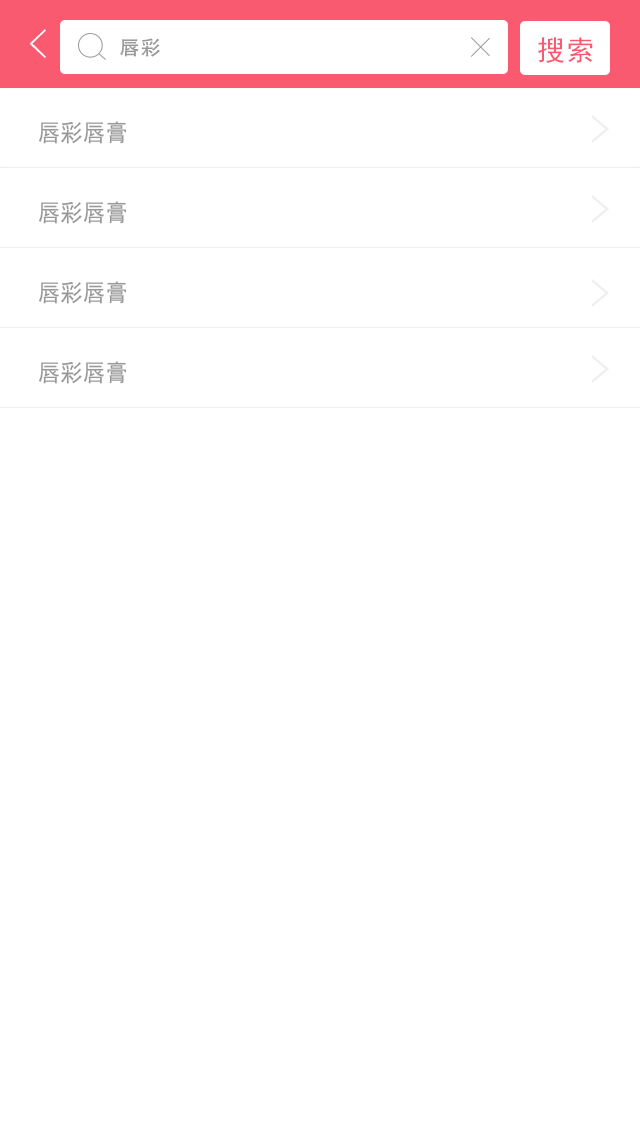
<style>
.page{position:relative;width:640px;height:1136px;background:#ffffff}
.page>*{position:absolute;margin:0}
.t1{font:40px "FZYXJW--GB1-0";color:#ffffff}
.t2{font:20px "AdobeHeitiStd-Regular";letter-spacing:0.06em;color:#999999}
.t3{font:28px "SimHei";letter-spacing:0.06em;color:#f95a70}
.t4{font:24px "SimHei";color:#999999;scale:0.94 1}
</style>
<div class="page">
<p class="t1" style="left:29px;top:29px;width:17px;height:29px">&lt;</p>
<p class="t2" style="left:120px;top:38px;width:40px;height:19px">唇彩</p>
<p class="t3" style="left:538px;top:37px;width:55px;height:26px">搜索</p>
<p class="t4" style="left:39px;top:121px;width:88px;height:23px">唇彩唇膏</p>
<p class="t4" style="left:39px;top:201px;width:88px;height:23px">唇彩唇膏</p>
<p class="t4" style="left:39px;top:281px;width:88px;height:23px">唇彩唇膏</p>
<p class="t4" style="left:39px;top:361px;width:88px;height:23px">唇彩唇膏</p>
</div>
